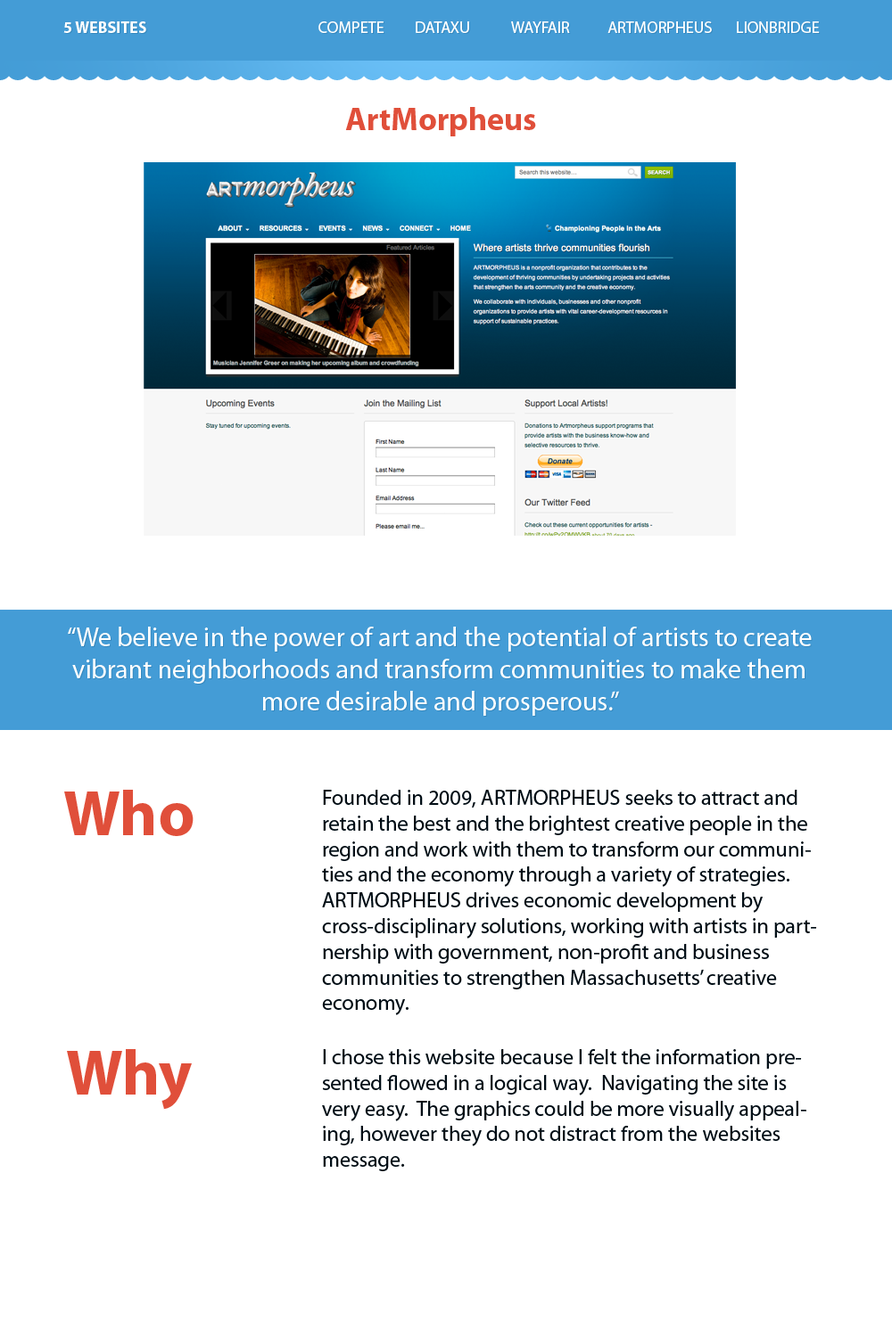
<style>
.page{position:relative;width:892px;height:1337px;background:#ffffff}
.page>*{position:absolute;margin:0}
.t1{font:16px "MyriadPro-Bold";color:#ffffff}
.t2{font:16px "MyriadPro-Regular";color:#ffffff}
.t3{font:32.1px "MyriadPro-Bold";color:#e04f3a}
.t4{font:26.7px "MyriadPro-Regular";color:#ffffff}
.t5{font:64.2px "MyriadPro-Bold";color:#e04f3a}
.t6{font:21.4px "MyriadPro-Regular";color:#000d15}
</style>
<div class="page">
<p class="t1" style="left:63px;top:21px;width:83px;height:12px">5 WEBSITES</p>
<p class="t2" style="left:318px;top:21px;width:501px;height:12px">COMPETE DATAXU  WAYFAIR  ARTMORPHEUS LIONBRIDGE</p>
<p class="t3" style="left:345px;top:107px;width:191px;height:29px">ArtMorpheus</p>
<p class="t4" style="left:68px;top:627px;width:743px;height:89px;text-align:center">“We believe in the power of art and the potential of artists to create vibrant neighborhoods and transform communities to make them more desirable and prosperous.”</p>
<p class="t5" style="left:64px;top:790px;width:129px;height:46px">Who</p>
<p class="t6" style="left:322px;top:790px;width:495px;height:226px">Founded in 2009, ARTMORPHEUS seeks to attract and retain the best and the brightest creative people in the region and work with them to transform our communities and the economy through a variety of strategies.  ARTMORPHEUS drives economic development by cross-disciplinary solutions, working with artists in partnership with government, non-profit and business communities to strengthen Massachusetts’ creative economy.</p>
<p class="t5" style="left:67px;top:1049px;width:125px;height:61px">Why</p>
<p class="t6" style="left:322px;top:1049px;width:484px;height:123px">I chose this website because I felt the information presented flowed in a logical way.  Navigating the site is very easy.  The graphics could be more visually appealing, however they do not distract from the websites message.</p>
</div>
